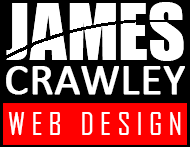
<style>
.page{position:relative;width:190px;height:147px;background:#000000}
.page>*{position:absolute;margin:0}
.t1{font:44.4px "Calibri";color:#ffffff;font-weight:bold}
.t2{font:29.8px "AgencyFB-Reg";letter-spacing:0.2em;color:#ffffff;scale:1.04 1}
</style>
<div class="page">
<p class="t1" style="left:6px;top:66px;width:179px;height:29px">CRAWLEY</p>
<p class="t2" style="left:8px;top:112px;width:173px;height:23px">WEB DESIGN</p>
</div>
